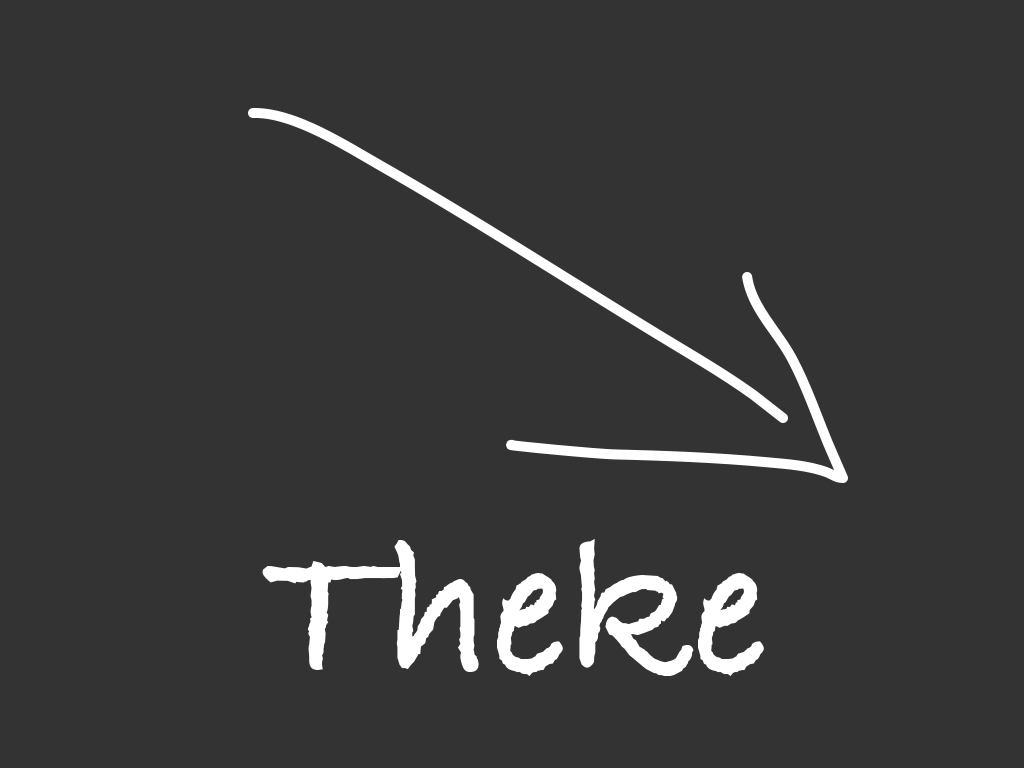
<style>
.page{position:relative;width:1024px;height:768px;background:#333333}
.page>*{position:absolute;margin:0}
.t1{font:200px "BradleyHandITCTT-Bold";color:#ffffff}
</style>
<div class="page">
<p class="t1" style="left:262px;top:539px;width:502px;height:137px">Theke</p>
</div>
